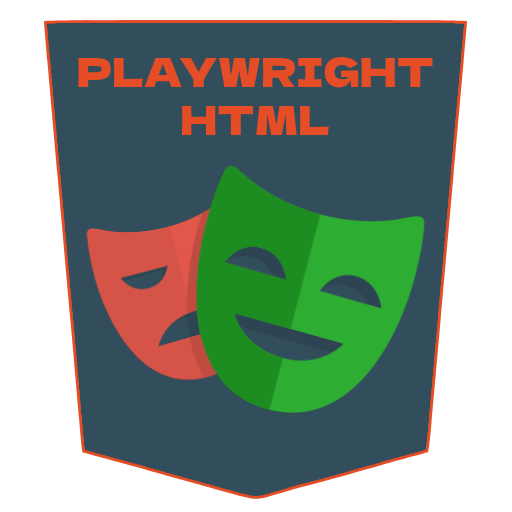
<style>
.page{position:relative;width:512px;height:512px;background:#324d5b}
.page>*{position:absolute;margin:0}
.t1{font:40px "DelaGothicOne-Regular";color:#e44d26}
</style>
<div class="page">
<p class="t1" style="left:78px;top:57px;width:355px;height:79px;text-align:center">PLAYWRIGHT<br>HTML</p>
</div>
